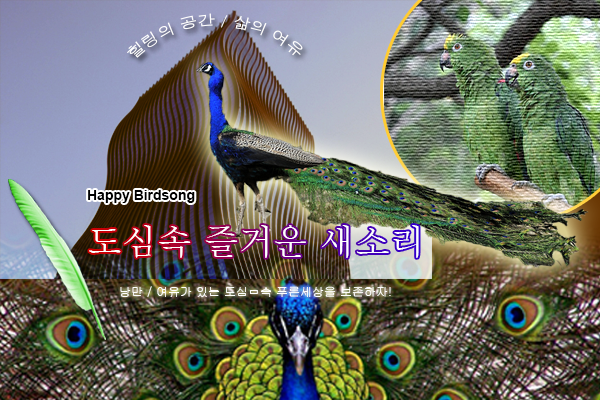
<style>
.page{position:relative;width:600px;height:400px}
.page>*{position:absolute;margin:0}
.t1{font:15px "Dotum";color:#ffffff}
.t2{font:13.8px "Arial-BoldMT";color:#000000}
.t3{font:34.6px "Batang";color:#ffffff}
.t4{font:11.9px "Gulim";color:#ffffff}
</style>
<div class="page">
<p class="t1" style="left:127px;top:13px;width:176px;height:45px">힐링의 공간 / 삶의 여유</p>
<p class="t2" style="left:88px;top:190px;width:107px;height:13px">Happy Birdsong</p>
<p class="t3" style="left:89px;top:225px;width:330px;height:33px">도심속 즐거운 새소리</p>
<p class="t4" style="left:120px;top:286px;width:271px;height:11px">낭만 / 여유가 있는 도심ㅁ속 푸른세상을 보존하자!</p>
</div>
